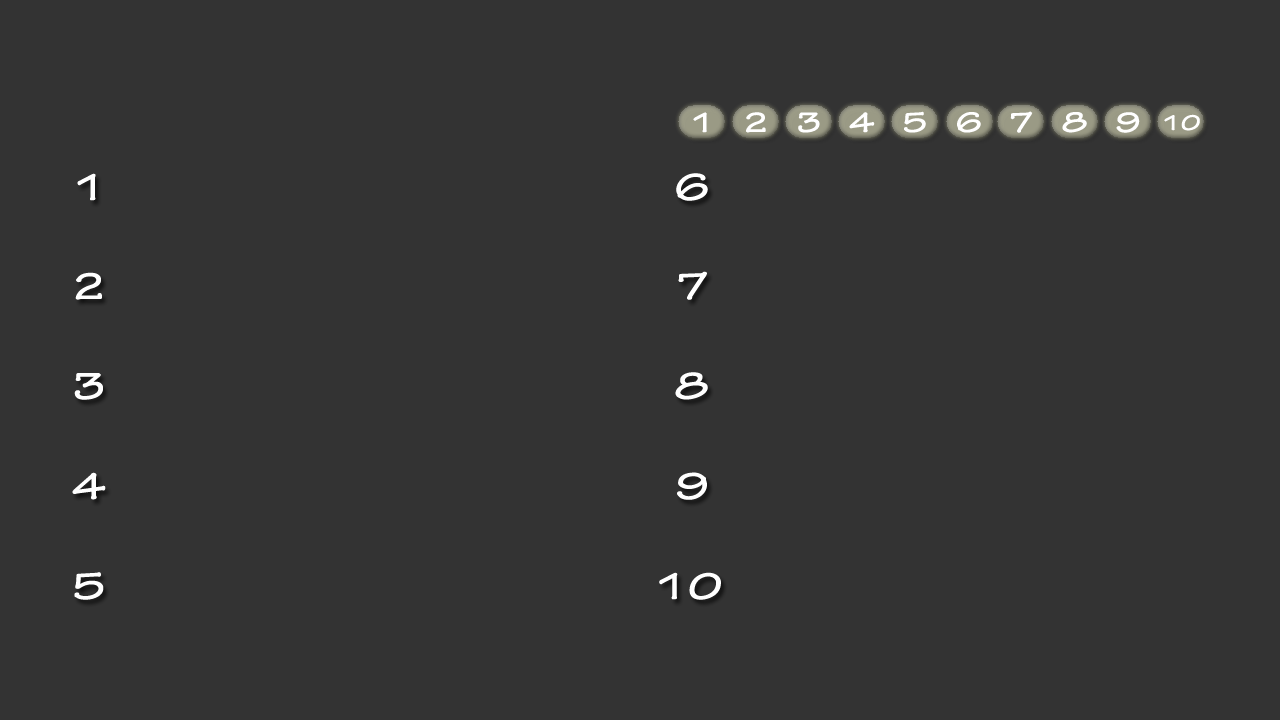
<style>
.page{position:relative;width:1280px;height:720px;background:#333333}
.page>*{position:absolute;margin:0}
.t1{font:30px "TektonPro-BoldExt";color:#ffffff}
.t2{font:23px "TektonPro-BoldExt";color:#ffffff}
.t3{font:40px "TektonPro-BoldExt";color:#ffffff}
</style>
<div class="page">
<p class="t1" style="left:693px;top:112px;width:14px;height:21px">1</p>
<p class="t1" style="left:746px;top:112px;width:20px;height:21px">2</p>
<p class="t1" style="left:798px;top:112px;width:22px;height:21px">3</p>
<p class="t1" style="left:849px;top:112px;width:26px;height:21px">4</p>
<p class="t1" style="left:904px;top:111px;width:22px;height:22px">5</p>
<p class="t1" style="left:957px;top:112px;width:24px;height:21px">6</p>
<p class="t1" style="left:1010px;top:111px;width:23px;height:22px">7</p>
<p class="t1" style="left:1062px;top:112px;width:25px;height:21px">8</p>
<p class="t1" style="left:1116px;top:112px;width:24px;height:21px">9</p>
<p class="t2" style="left:1164px;top:114px;width:36px;height:17px">10</p>
<p class="t3" style="left:77px;top:173px;width:19px;height:28px">1</p>
<p class="t3" style="left:676px;top:173px;width:32px;height:28px">6</p>
<p class="t3" style="left:75px;top:272px;width:27px;height:28px">2</p>
<p class="t3" style="left:678px;top:271px;width:29px;height:29px">7</p>
<p class="t3" style="left:74px;top:373px;width:29px;height:27px">3</p>
<p class="t3" style="left:675px;top:372px;width:33px;height:28px">8</p>
<p class="t3" style="left:72px;top:472px;width:34px;height:28px">4</p>
<p class="t3" style="left:677px;top:472px;width:30px;height:28px">9</p>
<p class="t3" style="left:74px;top:572px;width:30px;height:28px">5</p>
<p class="t3" style="left:659px;top:572px;width:62px;height:28px">10</p>
</div>
